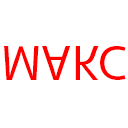
<style>
.page{position:relative;width:128px;height:128px;background:#ffffff}
.page>*{position:absolute;margin:0}
.t1{font:50px "MyriadPro-Regular";color:#ff0000}
</style>
<div class="page">
<p class="t1" style="left:4px;top:46px;width:122px;height:34px">МАКС</p>
</div>
